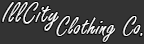
<style>
.page{position:relative;width:144px;height:44px;background:#333333}
.page>*{position:absolute;margin:0}
.t1{font:32.2px "FreestyleScript-Regular";color:#ffffff}
.t2{font:28.1px "FreestyleScript-Regular";color:#ffffff}
</style>
<div class="page">
<p class="t1" style="left:1px;top:2px;width:58px;height:29px">IllCity</p>
<p class="t2" style="left:56px;top:16px;width:87px;height:26px">Clothing Co.</p>
</div>
